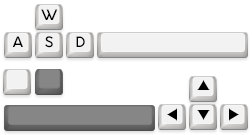
<style>
.page{position:relative;width:252px;height:135px;background:#ffffff}
.page>*{position:absolute;margin:0}
.t1{font:14px "Orkney-Medium";color:#000000}
</style>
<div class="page">
<p class="t1" style="left:41px;top:9px;width:17px;height:11px">W</p>
<p class="t1" style="left:12px;top:36px;width:11px;height:11px">A</p>
<p class="t1" style="left:45px;top:36px;width:8px;height:12px">S</p>
<p class="t1" style="left:76px;top:36px;width:9px;height:11px">D</p>
</div>
